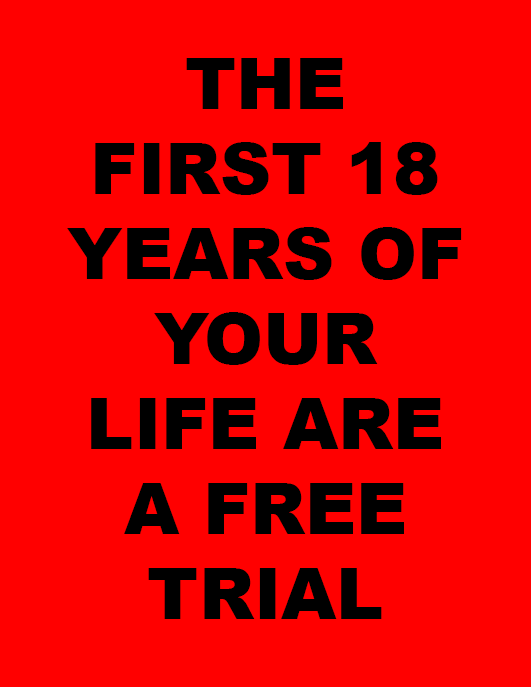
<style>
.page{position:relative;width:531px;height:687px;background:#ff0000}
.page>*{position:absolute;margin:0}
.t1{font:70.8px "Arial-Black";color:#000000}
</style>
<div class="page">
<p class="t1" style="left:67px;top:58px;width:395px;height:561px;text-align:center">THE FIRST 18 YEARS OF YOUR LIFE ARE A FREE TRIAL</p>
</div>
